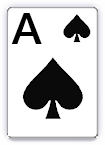
<style>
.page{position:relative;width:105px;height:145px;background:#ffffff}
.page>*{position:absolute;margin:0}
.t1{font:44px "HelveticaNeue-Medium";color:#000000;text-transform:uppercase}
</style>
<div class="page">
<p class="t1" style="left:11px;top:13px;width:31px;height:31px">A</p>
</div>
